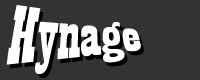
<style>
.page{position:relative;width:200px;height:80px;background:#333333}
.page>*{position:absolute;margin:0}
.t1{font:54px "Playbill";color:#ffffff;scale:1.5 1}
</style>
<div class="page">
<p class="t1" style="left:6px;top:5px;width:135px;height:69px">Hynage</p>
</div>
